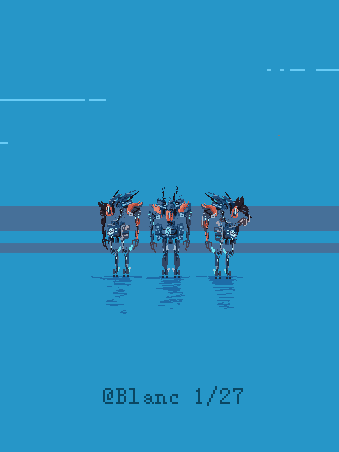
<style>
.page{position:relative;width:339px;height:452px;background:#2696c8}
.page>*{position:absolute;margin:0}
.t1{font:24px "FZXS12--GB1-0";letter-spacing:0.04em;color:#0a4763}
</style>
<div class="page">
<p class="t1" style="left:103px;top:386px;width:140px;height:20px">@Blanc 1/27</p>
</div>
